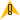
<style>
.page{position:relative;width:20px;height:20px;background:#ffffff}
.page>*{position:absolute;margin:0}
.t1{font:12px "Arial-BoldMT";color:#ffb90f}
</style>
<div class="page">
<p class="t1" style="left:9px;top:5px;width:2px;height:9px">!</p>
</div>
